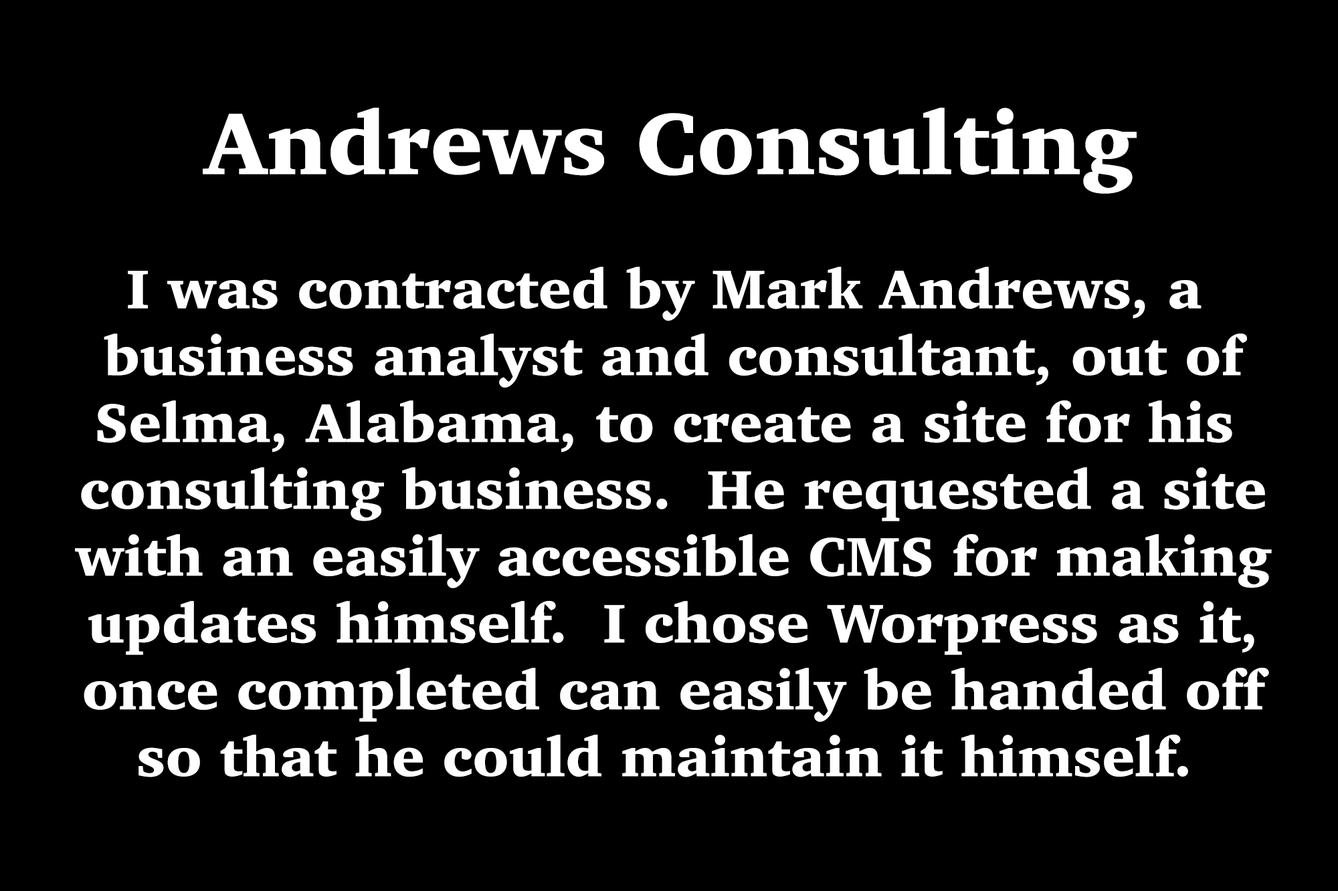
<style>
.page{position:relative;width:1338px;height:891px;background:#000000}
.page>*{position:absolute;margin:0}
.t1{font:89.2px "Charter-Black";color:#ffffff}
.t2{font:55.7px "Charter-Black";color:#ffffff}
</style>
<div class="page">
<p class="t1" style="left:203px;top:108px;width:933px;height:86px">Andrews Consulting</p>
<p class="t2" style="left:75px;top:267px;width:1196px;height:511px;text-align:center">I was contracted by Mark Andrews, a <br>business analyst and consultant, out of<br>Selma, Alabama, to create a site for his <br>consulting business.  He requested a site<br>with an easily accessible CMS for making<br>updates himself.  I chose Worpress as it,<br>once completed can easily be handed off<br>so that he could maintain it himself.</p>
</div>
